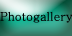
<style>
.page{position:relative;width:72px;height:36px}
.page>*{position:absolute;margin:0}
.t1{font:12px "Batang";color:#000000}
</style>
<div class="page">
<p class="t1" style="left:0px;top:11px;width:73px;height:12px">Photogallery</p>
</div>
